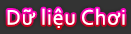
<style>
.page{position:relative;width:131px;height:34px;background:#333333}
.page>*{position:absolute;margin:0}
.t1{font:22px "Corbel";letter-spacing:0.035em;color:#ffffff}
</style>
<div class="page">
<p class="t1" style="left:7px;top:8px;width:118px;height:20px">Dữ liệu Chơi</p>
</div>
